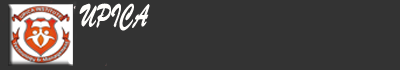
<style>
.page{position:relative;width:400px;height:70px;background:#333333}
.page>*{position:absolute;margin:0}
.t1{font:32.1px "BrushScriptStd";letter-spacing:0.005em;color:#fffefc;scale:0.6 1}
</style>
<div class="page">
<p class="t1" style="left:79px;top:3px;width:71px;height:28px">UPICA</p>
</div>
